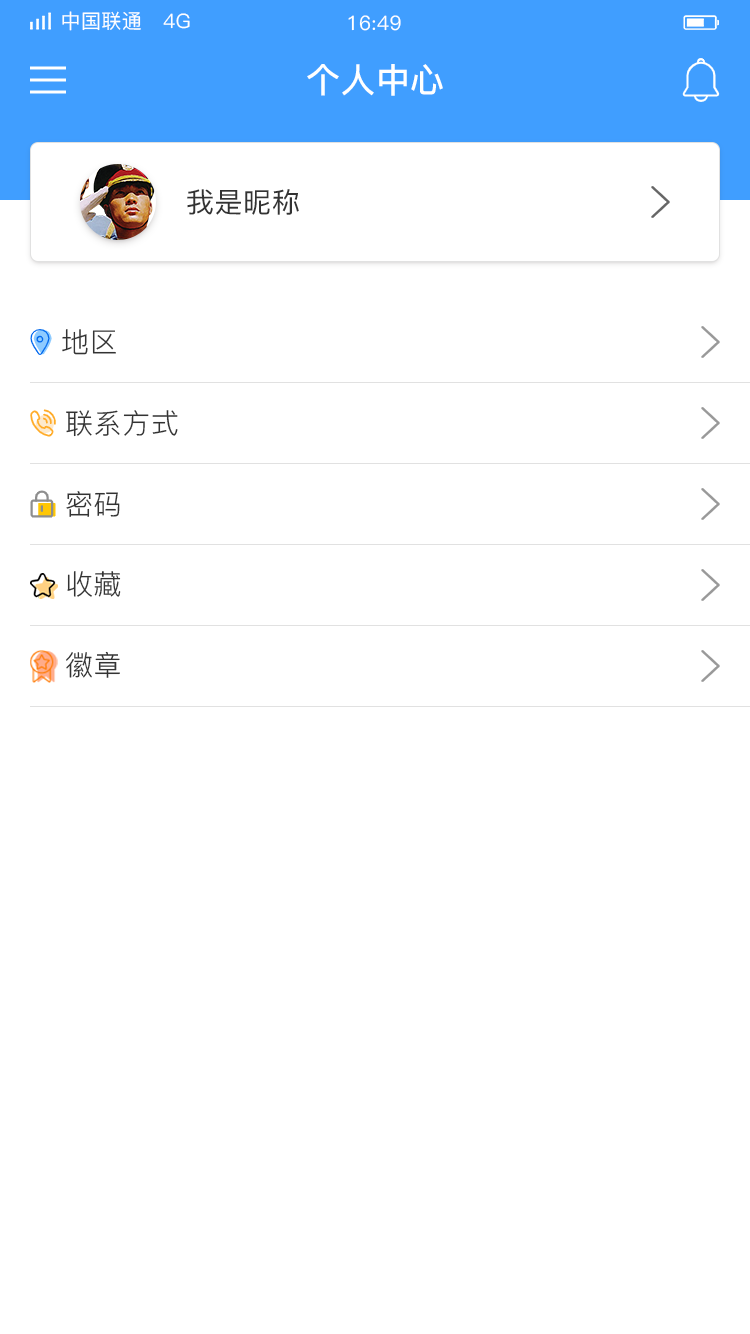
<style>
.page{position:relative;width:750px;height:1334px;background:#ffffff}
.page>*{position:absolute;margin:0}
.t1{font:20px "PingFang-SC-Medium";letter-spacing:0.02em;color:#ffffff}
.t2{font:34px "PingFang-SC-Bold";letter-spacing:0.02em;color:#ffffff}
.t3{font:28px "PingFang-SC-Medium";letter-spacing:0.02em;color:#333333}
.t4{font:28px "PingFang-SC-Regular";letter-spacing:0.02em;color:#333333}
</style>
<div class="page">
<p class="t1" style="left:62px;top:11px;width:128px;height:20px">中国联通   4G</p>
<p class="t1" style="left:348px;top:15px;width:53px;height:16px">16:49</p>
<p class="t2" style="left:307px;top:64px;width:136px;height:32px">个人中心</p>
<p class="t3" style="left:187px;top:189px;width:112px;height:26px">我是昵称</p>
<p class="t4" style="left:62px;top:329px;width:54px;height:26px">地区</p>
<p class="t4" style="left:66px;top:410px;width:112px;height:27px">联系方式</p>
<p class="t4" style="left:66px;top:491px;width:54px;height:26px">密码</p>
<p class="t4" style="left:67px;top:571px;width:54px;height:26px">收藏</p>
<p class="t4" style="left:66px;top:651px;width:54px;height:27px">徽章</p>
</div>
